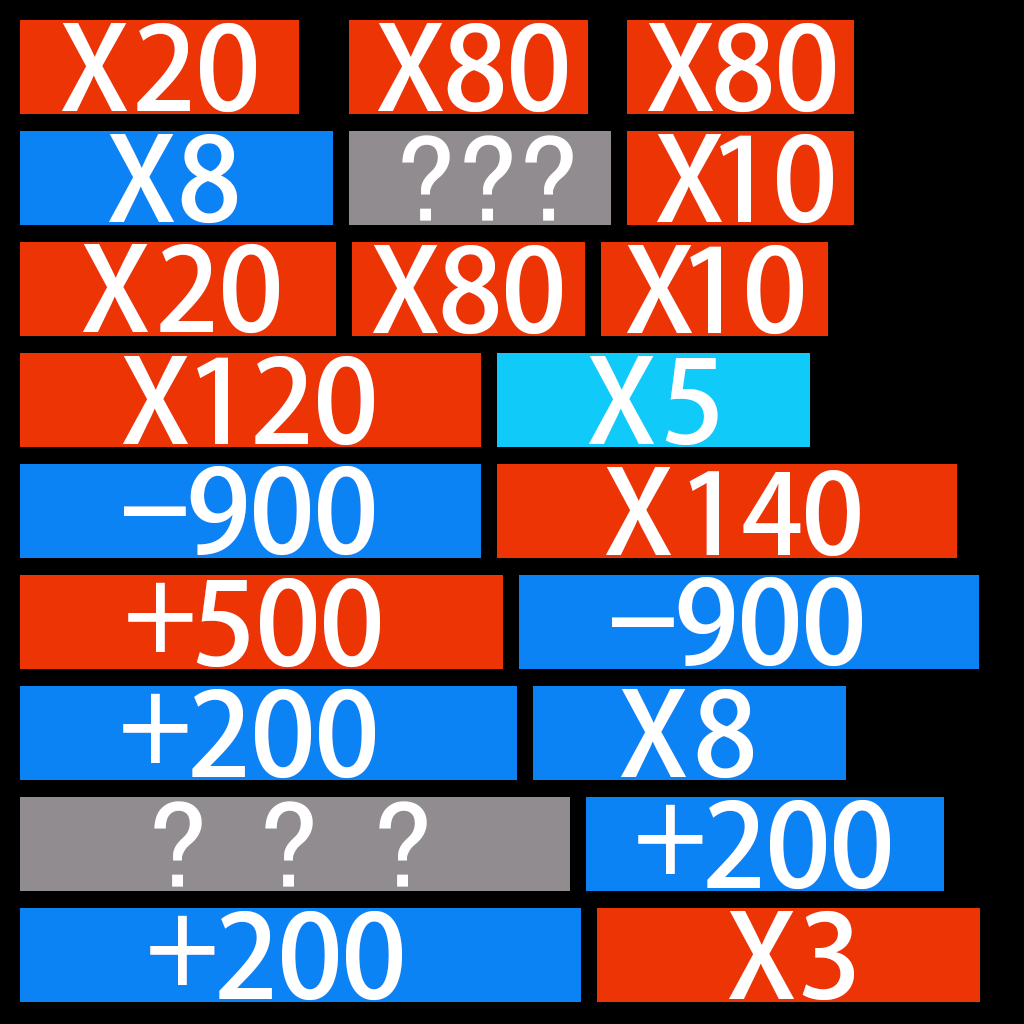
<style>
.page{position:relative;width:1024px;height:1024px;background:#000000}
.page>*{position:absolute;margin:0}
.t1{font:114.4px "AdobeHeitiStd-Regular";color:#ffffff}
.t2{font:126.4px "SimHei";color:#ffffff}
.t3{font:110.8px "AdobeHeitiStd-Regular";color:#ffffff}
.t4{font:114.4px "AdobeHeitiStd-Regular";color:#ffffff;scale:1.97 1}
.t5{font:114.4px "AdobeHeitiStd-Regular";color:#ffffff;scale:0.96 1}
</style>
<div class="page">
<p class="t1" style="left:62px;top:23px;width:65px;height:88px">X</p>
<p class="t1" style="left:137px;top:22px;width:119px;height:91px">20</p>
<p class="t1" style="left:378px;top:23px;width:65px;height:88px">X</p>
<p class="t1" style="left:447px;top:22px;width:120px;height:91px">80</p>
<p class="t1" style="left:648px;top:23px;width:65px;height:88px">X</p>
<p class="t1" style="left:715px;top:22px;width:120px;height:91px">80</p>
<p class="t1" style="left:109px;top:134px;width:65px;height:88px">X</p>
<p class="t1" style="left:181px;top:134px;width:56px;height:90px">8</p>
<p class="t2" style="left:402px;top:135px;width:48px;height:86px">?</p>
<p class="t2" style="left:464px;top:135px;width:48px;height:86px">?</p>
<p class="t2" style="left:525px;top:135px;width:48px;height:86px">?</p>
<p class="t1" style="left:657px;top:134px;width:65px;height:88px">X</p>
<p class="t1" style="left:720px;top:133px;width:113px;height:91px">10</p>
<p class="t1" style="left:83px;top:244px;width:65px;height:88px">X</p>
<p class="t1" style="left:160px;top:243px;width:119px;height:91px">20</p>
<p class="t1" style="left:373px;top:245px;width:65px;height:88px">X</p>
<p class="t1" style="left:442px;top:244px;width:120px;height:91px">80</p>
<p class="t1" style="left:627px;top:245px;width:65px;height:88px">X</p>
<p class="t1" style="left:690px;top:244px;width:113px;height:91px">10</p>
<p class="t1" style="left:123px;top:356px;width:65px;height:88px">X</p>
<p class="t1" style="left:197px;top:355px;width:177px;height:91px">120</p>
<p class="t1" style="left:589px;top:356px;width:65px;height:88px">X</p>
<p class="t1" style="left:665px;top:358px;width:53px;height:88px">5</p>
<p class="t1" style="left:190px;top:465px;width:184px;height:91px">900</p>
<p class="t1" style="left:606px;top:467px;width:65px;height:88px">X</p>
<p class="t3" style="left:689px;top:470px;width:171px;height:86px">140</p>
<p class="t4" style="left:124px;top:506px;width:62px;height:10px">-</p>
<p class="t5" style="left:128px;top:582px;width:65px;height:70px">+</p>
<p class="t1" style="left:196px;top:577px;width:184px;height:91px">500</p>
<p class="t1" style="left:678px;top:576px;width:184px;height:91px">900</p>
<p class="t4" style="left:612px;top:617px;width:62px;height:10px">-</p>
<p class="t1" style="left:192px;top:688px;width:183px;height:91px">200</p>
<p class="t1" style="left:621px;top:689px;width:65px;height:88px">X</p>
<p class="t1" style="left:697px;top:689px;width:56px;height:90px">8</p>
<p class="t5" style="left:123px;top:693px;width:65px;height:70px">+</p>
<p class="t2" style="left:154px;top:801px;width:48px;height:86px">?</p>
<p class="t2" style="left:265px;top:801px;width:48px;height:86px">?</p>
<p class="t2" style="left:379px;top:801px;width:48px;height:86px">?</p>
<p class="t5" style="left:638px;top:804px;width:65px;height:70px">+</p>
<p class="t1" style="left:707px;top:799px;width:183px;height:91px">200</p>
<p class="t5" style="left:150px;top:915px;width:65px;height:70px">+</p>
<p class="t1" style="left:219px;top:910px;width:183px;height:91px">200</p>
<p class="t1" style="left:729px;top:911px;width:65px;height:88px">X</p>
<p class="t1" style="left:802px;top:910px;width:52px;height:91px">3</p>
</div>
